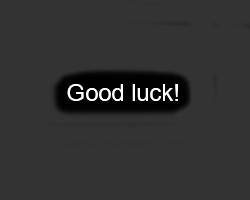
<style>
.page{position:relative;width:250px;height:200px;background:#333333}
.page>*{position:absolute;margin:0}
.t1{font:24px "ArialMT";color:#ffffff}
</style>
<div class="page">
<p class="t1" style="left:67px;top:84px;width:111px;height:17px">Good luck!</p>
</div>
